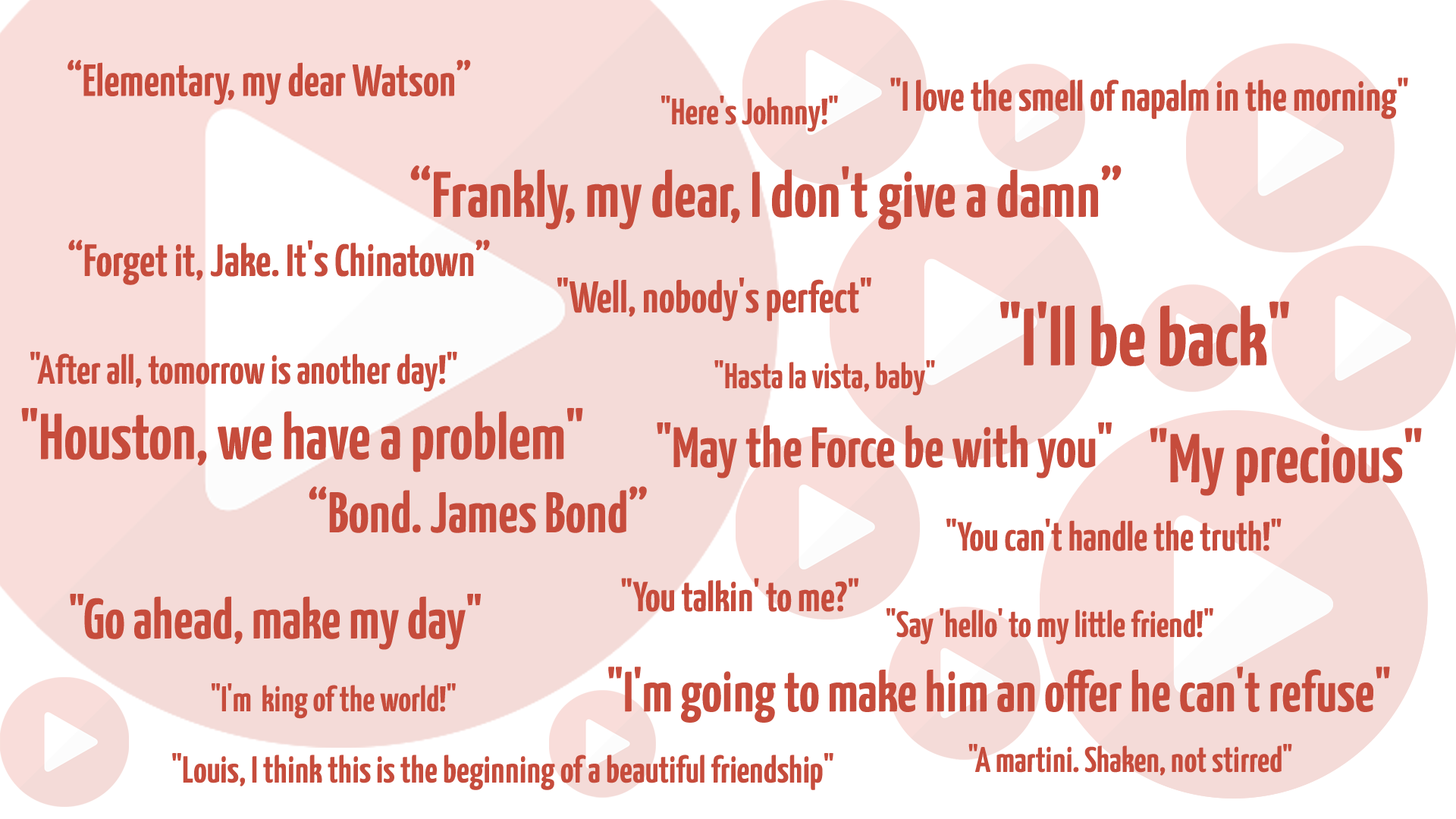
<style>
.page{position:relative;width:1456px;height:819px;background:#ffffff}
.page>*{position:absolute;margin:0}
.t1{font:45px "YanoneKaffeesatz-Bold";color:#c64c3c}
.t2{font:42px "YanoneKaffeesatz-Bold";color:#c64c3c}
.t3{font:36.9px "YanoneKaffeesatz-Bold";color:#c64c3c}
.t4{font:64.4px "YanoneKaffeesatz-Bold";color:#c64c3c}
.t5{font:45.2px "YanoneKaffeesatz-Bold";color:#c64c3c}
.t6{font:44.4px "YanoneKaffeesatz-Bold";color:#c64c3c}
.t7{font:81px "YanoneKaffeesatz-Bold";color:#c64c3c}
.t8{font:40.6px "YanoneKaffeesatz-Bold";color:#c64c3c}
.t9{font:35.7px "YanoneKaffeesatz-Bold";color:#c64c3c}
.t10{font:65.1px "YanoneKaffeesatz-Bold";color:#c64c3c}
.t11{font:57px "YanoneKaffeesatz-Bold";color:#c64c3c}
.t12{font:68.9px "YanoneKaffeesatz-Bold";color:#c64c3c}
.t13{font:57.4px "YanoneKaffeesatz-Bold";color:#c64c3c}
.t14{font:35.6px "YanoneKaffeesatz-Bold";color:#c64c3c}
.t15{font:37.3px "YanoneKaffeesatz-Bold";color:#c64c3c}
</style>
<div class="page">
<p class="t1" style="left:67px;top:60px;width:404px;height:45px">“Elementary, my dear Watson”</p>
<p class="t2" style="left:890px;top:77px;width:518px;height:42px">"I love the smell of napalm in the morning"</p>
<p class="t3" style="left:661px;top:96px;width:177px;height:36px">"Here's Johnny!"</p>
<p class="t4" style="left:410px;top:165px;width:712px;height:65px">“Frankly, my dear, I don't give a damn”</p>
<p class="t5" style="left:68px;top:240px;width:422px;height:45px">“Forget it, Jake. It's Chinatown”</p>
<p class="t6" style="left:557px;top:278px;width:314px;height:44px">"Well, nobody's perfect"</p>
<p class="t7" style="left:1000px;top:301px;width:289px;height:65px">"I'll be back"</p>
<p class="t8" style="left:30px;top:351px;width:427px;height:41px">"After all, tomorrow is another day!"</p>
<p class="t9" style="left:714px;top:360px;width:221px;height:36px">"Hasta la vista, baby"</p>
<p class="t10" style="left:21px;top:408px;width:562px;height:64px">"Houston, we have a problem"</p>
<p class="t11" style="left:657px;top:422px;width:455px;height:57px">"May the Force be with you"</p>
<p class="t12" style="left:1150px;top:428px;width:272px;height:68px">"My precious"</p>
<p class="t13" style="left:309px;top:486px;width:338px;height:47px">“Bond. James Bond”</p>
<p class="t8" style="left:946px;top:518px;width:336px;height:33px">"You can't handle the truth!"</p>
<p class="t2" style="left:621px;top:578px;width:237px;height:34px">"You talkin' to me?"</p>
<p class="t11" style="left:70px;top:594px;width:411px;height:56px">"Go ahead, make my day"</p>
<p class="t3" style="left:886px;top:608px;width:327px;height:37px">"Say 'hello' to my little friend!"</p>
<p class="t11" style="left:608px;top:667px;width:782px;height:56px">"I'm going to make him an offer he can't refuse"</p>
<p class="t14" style="left:212px;top:683px;width:244px;height:36px">"I'm  king of the world!"</p>
<p class="t14" style="left:968px;top:744px;width:324px;height:32px">"A martini. Shaken, not stirred"</p>
<p class="t15" style="left:172px;top:753px;width:661px;height:37px">"Louis, I think this is the beginning of a beautiful friendship"</p>
</div>
